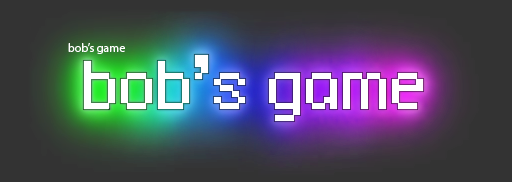
<style>
.page{position:relative;width:512px;height:182px;background:#333333}
.page>*{position:absolute;margin:0}
.t1{font:12px "MyriadPro-Regular";color:#ffffff}
</style>
<div class="page">
<p class="t1" style="left:68px;top:43px;width:57px;height:11px">bob’s game</p>
</div>
